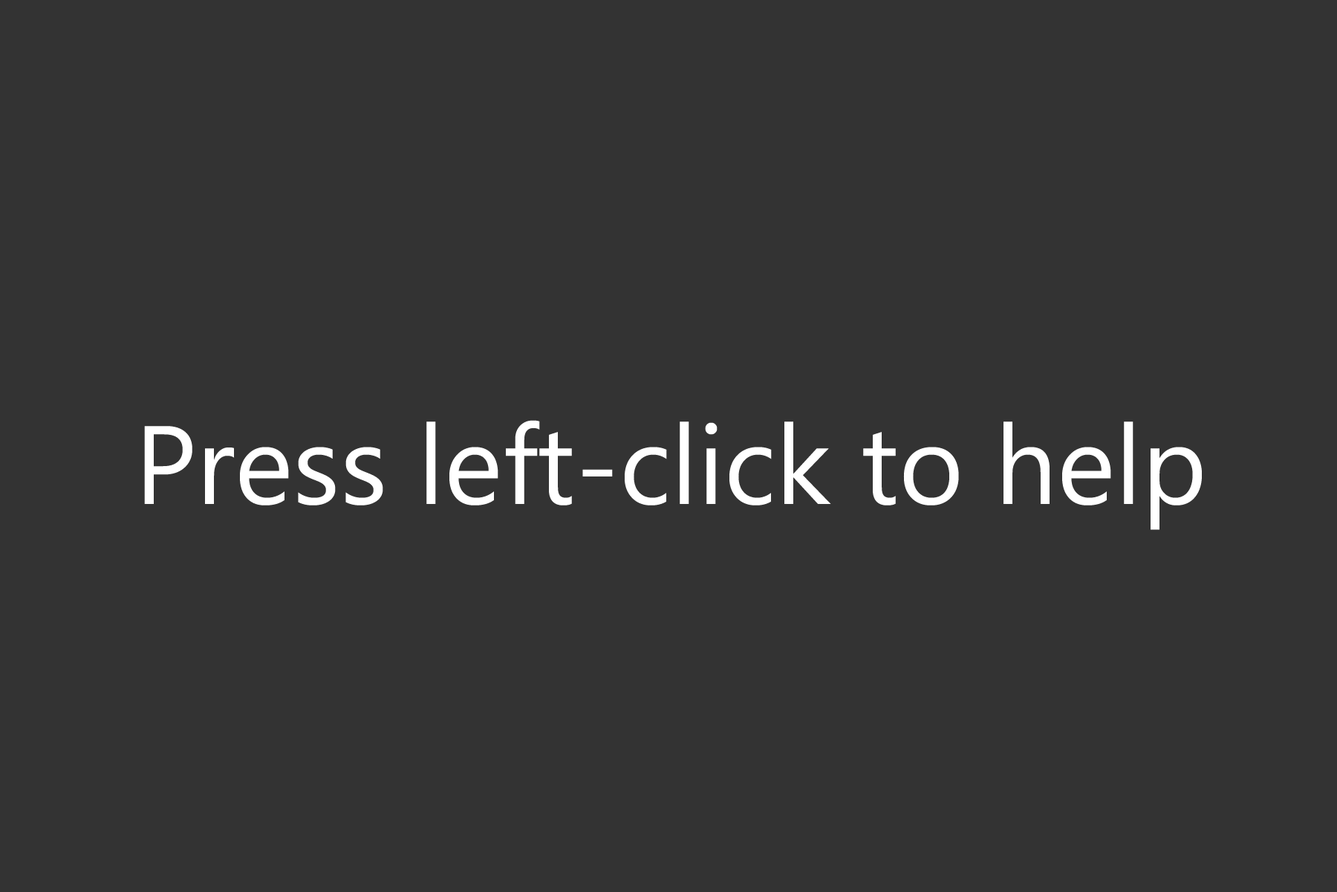
<style>
.page{position:relative;width:1337px;height:892px;background:#333333}
.page>*{position:absolute;margin:0}
.t1{font:111px "NirmalaUI";color:#ffffff}
</style>
<div class="page">
<p class="t1" style="left:144px;top:420px;width:1058px;height:110px">Press left-click to help</p>
</div>
